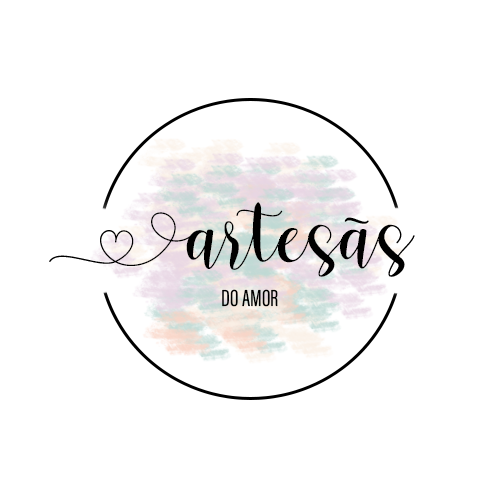
<style>
.page{position:relative;width:500px;height:500px;background:#ffffff}
.page>*{position:absolute;margin:0}
.t1{font:80.5px "RomanticaRegular";color:#000000}
.t2{font:72px "RomanticaRegular";color:#000000}
.t3{font:24px "AcuminConcept-ExtraCondensed";color:#000000}
</style>
<div class="page">
<p class="t1" style="left:49px;top:202px;width:366px;height:75px">artesãs</p>
<p class="t2" style="left:344px;top:217px;width:25px;height:7px">~</p>
<p class="t3" style="left:222px;top:289px;width:56px;height:18px">DO AMOR</p>
</div>
